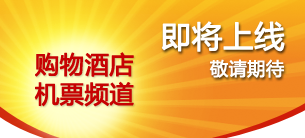
<style>
.page{position:relative;width:305px;height:138px}
.page>*{position:absolute;margin:0}
.t1{font:30px "MicrosoftYaHei";letter-spacing:0.01em;color:#ffffff;font-weight:bold}
.t2{font:24px/29.5px "MicrosoftYaHei";letter-spacing:0.01em;color:#c70203;font-weight:bold}
.t3{font:18px "MicrosoftYaHei";letter-spacing:0.01em;color:#ffffff;font-weight:bold}
</style>
<div class="page">
<p class="t1" style="left:161px;top:21px;width:124px;height:31px">即将上线</p>
<p class="t2" style="left:34px;top:52px;width:100px;height:55px">购物酒店<br>机票频道</p>
<p class="t3" style="left:209px;top:59px;width:75px;height:19px">敬请期待</p>
</div>
